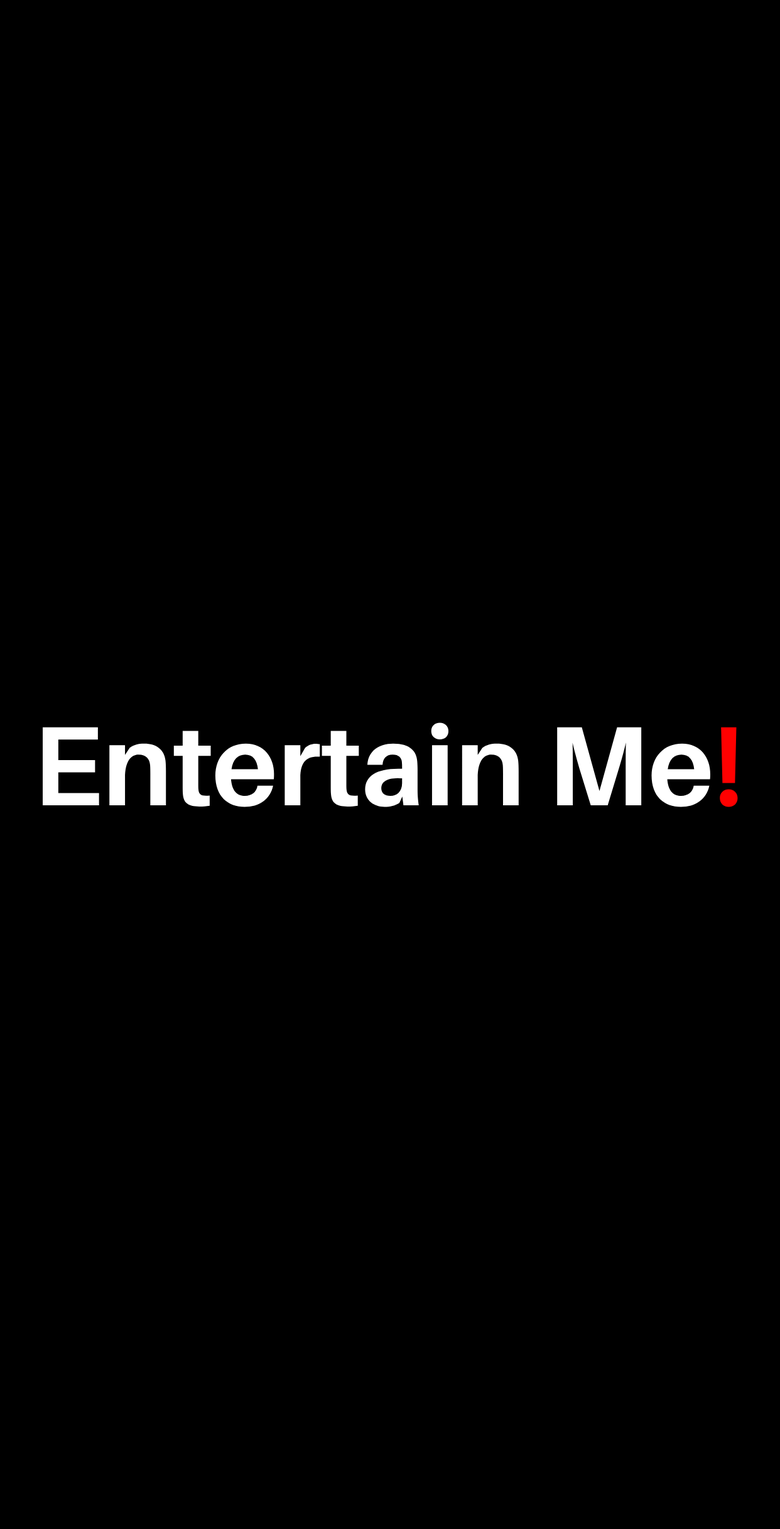
<style>
.page{position:relative;width:780px;height:1529px;background:#000000}
.page>*{position:absolute;margin:0}
.t1{font:113px "Aileron-Bold";color:#ffffff}
.t2{font:113px "Aileron-Bold";color:#ff0000}
</style>
<div class="page">
<p class="t1" style="left:43px;top:723px;width:695px;height:84px">Entertain Me<span class="t2">!</span></p>
</div>
